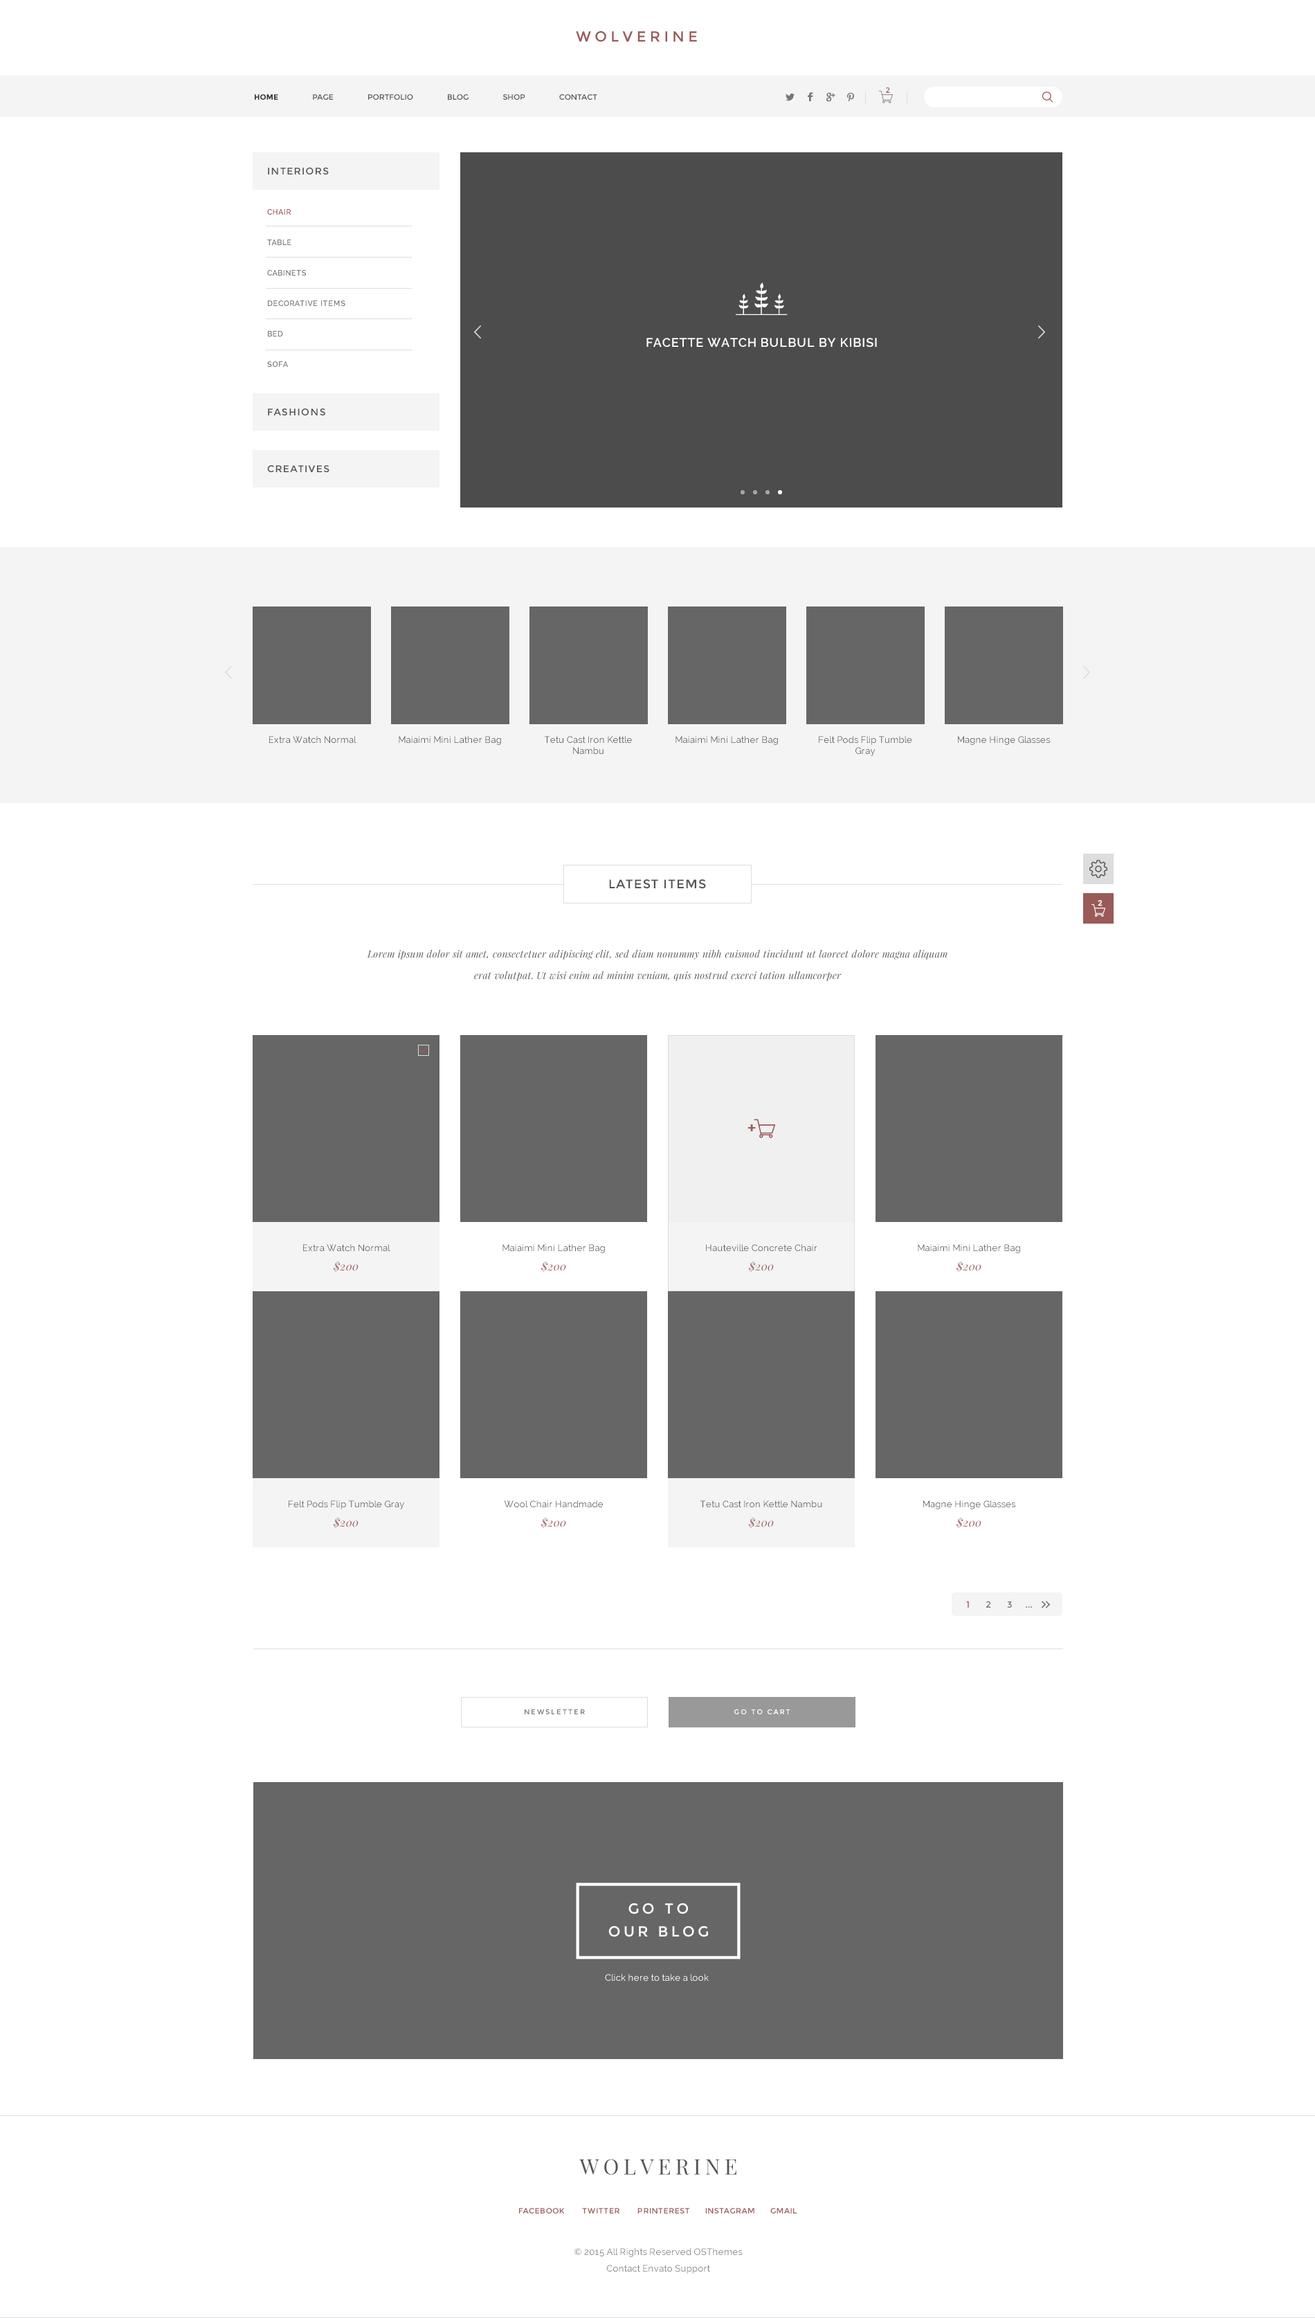
<style>
.page{position:relative;width:1315px;height:2318px;background:#ffffff}
.page>*{position:absolute;margin:0}
.t1{font:14.5px "Montserrat-Regular";color:#9a5a58}
.t2{font:7.6px "Montserrat-Regular";color:#9a5a58}
.t3{font:7.6px "Montserrat-Regular";color:#545454}
.t4{font:7.6px "Montserrat-Bold";color:#333333}
.t5{font:9.7px "Montserrat-Regular";letter-spacing:0.1em;color:#555555}
.t6{font:7.6px/15.2px "Raleway-SemiBold";letter-spacing:0.05em;color:#777777}
.t7{font:7.6px/15.2px "Raleway-SemiBold";letter-spacing:0.05em;color:#995958}
.t8{font:12.5px "Raleway-SemiBold";letter-spacing:0.05em;color:#ffffff}
.t9{font:9px "Raleway";letter-spacing:0.02em;color:#545454}
.t10{font:9px/10.8px "Raleway";letter-spacing:0.02em;color:#545454}
.t11{font:12.5px "Montserrat-Regular";letter-spacing:0.05em;color:#535353}
.t12{font:7.6px "Montserrat-Regular";color:#ffffff;font-weight:bold}
.t13{font:9.7px/21.3px "PlayfairDisplay-Italic";letter-spacing:0.02em;color:#555555}
.t14{font:11.1px "PlayfairDisplay-Italic";letter-spacing:0.02em;color:#995958}
.t15{font:9px "Montserrat-Regular";color:#777777}
.t16{font:9px "Montserrat-Regular";color:#995958}
.t17{font:6.9px "Montserrat-Regular";letter-spacing:0.2em;color:#777777}
.t18{font:6.9px "Montserrat-Regular";letter-spacing:0.2em;color:#ffffff}
.t19{font:14.5px/23.3px "Montserrat-Regular";letter-spacing:0.2em;color:#ffffff}
.t20{font:9px "Raleway";letter-spacing:0.02em;color:#ffffff}
.t21{font:21.4px "PlayfairDisplay-Regular";letter-spacing:0.1em;color:#555555}
.t22{font:7.6px "Montserrat-Regular";letter-spacing:0.05em;color:#995958}
.t23{font:9px/16.2px "Raleway";letter-spacing:0.02em;color:#777777}
</style>
<div class="page">
<p class="t1" style="left:576px;top:31px;width:121px;height:11px">WOLVERINE</p>
<p class="t2" style="left:886px;top:87px;width:4px;height:6px">2</p>
<p class="t3" style="left:255px;top:94px;width:342px;height:6px"><span class="t4">HOME</span>      PAGE      PORTFOLIO      BLOG      SHOP      CONTACT</p>
<p class="t5" style="left:268px;top:168px;width:61px;height:6px">INTERIORS</p>
<p class="t6" style="left:267px;top:209px;width:78px;height:158px"><span class="t7">CHAIR<br><br></span>TABLE<br><br>CABINETS<br><br>DECORATIVE ITEMS<br><br>BED<br><br>SOFA</p>
<p class="t8" style="left:647px;top:338px;width:230px;height:9px">FACETTE WATCH BULBUL BY KIBISI</p>
<p class="t5" style="left:268px;top:408px;width:57px;height:7px">FASHIONS</p>
<p class="t5" style="left:267px;top:465px;width:63px;height:7px">CREATIVES</p>
<p class="t9" style="left:269px;top:736px;width:88px;height:8px">Extra Watch Normal</p>
<p class="t9" style="left:399px;top:736px;width:102px;height:9px">Maiaimi Mini Lather Bag</p>
<p class="t10" style="left:544px;top:736px;width:88px;height:19px;text-align:center">Tetu Cast Iron Kettle Nambu</p>
<p class="t9" style="left:676px;top:736px;width:102px;height:9px">Maiaimi Mini Lather Bag</p>
<p class="t10" style="left:819px;top:736px;width:93px;height:20px;text-align:center">Felt Pods Flip Tumble Gray</p>
<p class="t9" style="left:958px;top:736px;width:92px;height:9px">Magne Hinge Glasses</p>
<p class="t11" style="left:609px;top:879px;width:97px;height:10px">LATEST ITEMS</p>
<p class="t12" style="left:1098px;top:900px;width:5px;height:6px">2</p>
<p class="t13" style="left:367px;top:949px;width:581px;height:32px;text-align:center">Lorem ipsum dolor sit amet, consectetuer adipiscing elit, sed diam nonummy nibh euismod tincidunt ut laoreet dolore magna aliquam erat volutpat. Ut wisi enim ad minim veniam, quis nostrud exerci tation ullamcorper</p>
<p class="t9" style="left:303px;top:1244px;width:87px;height:8px">Extra Watch Normal</p>
<p class="t9" style="left:503px;top:1244px;width:102px;height:9px">Maiaimi Mini Lather Bag</p>
<p class="t9" style="left:706px;top:1244px;width:112px;height:8px">Hauteville Concrete Chair</p>
<p class="t9" style="left:918px;top:1244px;width:102px;height:9px">Maiaimi Mini Lather Bag</p>
<p class="t14" style="left:334px;top:1261px;width:25px;height:11px">$200</p>
<p class="t14" style="left:541px;top:1261px;width:25px;height:11px">$200</p>
<p class="t14" style="left:749px;top:1261px;width:25px;height:11px">$200</p>
<p class="t14" style="left:957px;top:1261px;width:25px;height:11px">$200</p>
<p class="t9" style="left:289px;top:1500px;width:115px;height:9px">Felt Pods Flip Tumble Gray</p>
<p class="t9" style="left:504px;top:1500px;width:99px;height:8px">Wool Chair Handmade</p>
<p class="t9" style="left:700px;top:1500px;width:122px;height:8px">Tetu Cast Iron Kettle Nambu</p>
<p class="t9" style="left:924px;top:1500px;width:92px;height:9px">Magne Hinge Glasses</p>
<p class="t14" style="left:334px;top:1517px;width:25px;height:12px">$200</p>
<p class="t14" style="left:541px;top:1517px;width:25px;height:12px">$200</p>
<p class="t14" style="left:749px;top:1517px;width:25px;height:12px">$200</p>
<p class="t14" style="left:957px;top:1517px;width:25px;height:12px">$200</p>
<p class="t15" style="left:966px;top:1601px;width:66px;height:7px"><span class="t16">1</span>     2     3    ...</p>
<p class="t17" style="left:525px;top:1709px;width:60px;height:5px">NEWSLETTER</p>
<p class="t18" style="left:735px;top:1709px;width:56px;height:5px">GO TO CART</p>
<p class="t19" style="left:609px;top:1903px;width:99px;height:34px;text-align:center">GO TO<br>OUR BLOG</p>
<p class="t20" style="left:605px;top:1974px;width:104px;height:7px">Click here to take a look</p>
<p class="t21" style="left:579px;top:2159px;width:158px;height:16px">WOLVERINE</p>
<p class="t22" style="left:519px;top:2208px;width:278px;height:5px">FACEBOOK       TWITTER       PRINTEREST      INSTAGRAM      GMAIL</p>
<p class="t23" style="left:575px;top:2248px;width:168px;height:26px;text-align:center">© 2015 All Rights Reserved OSThemes<br>Contact Envato Support</p>
</div>
